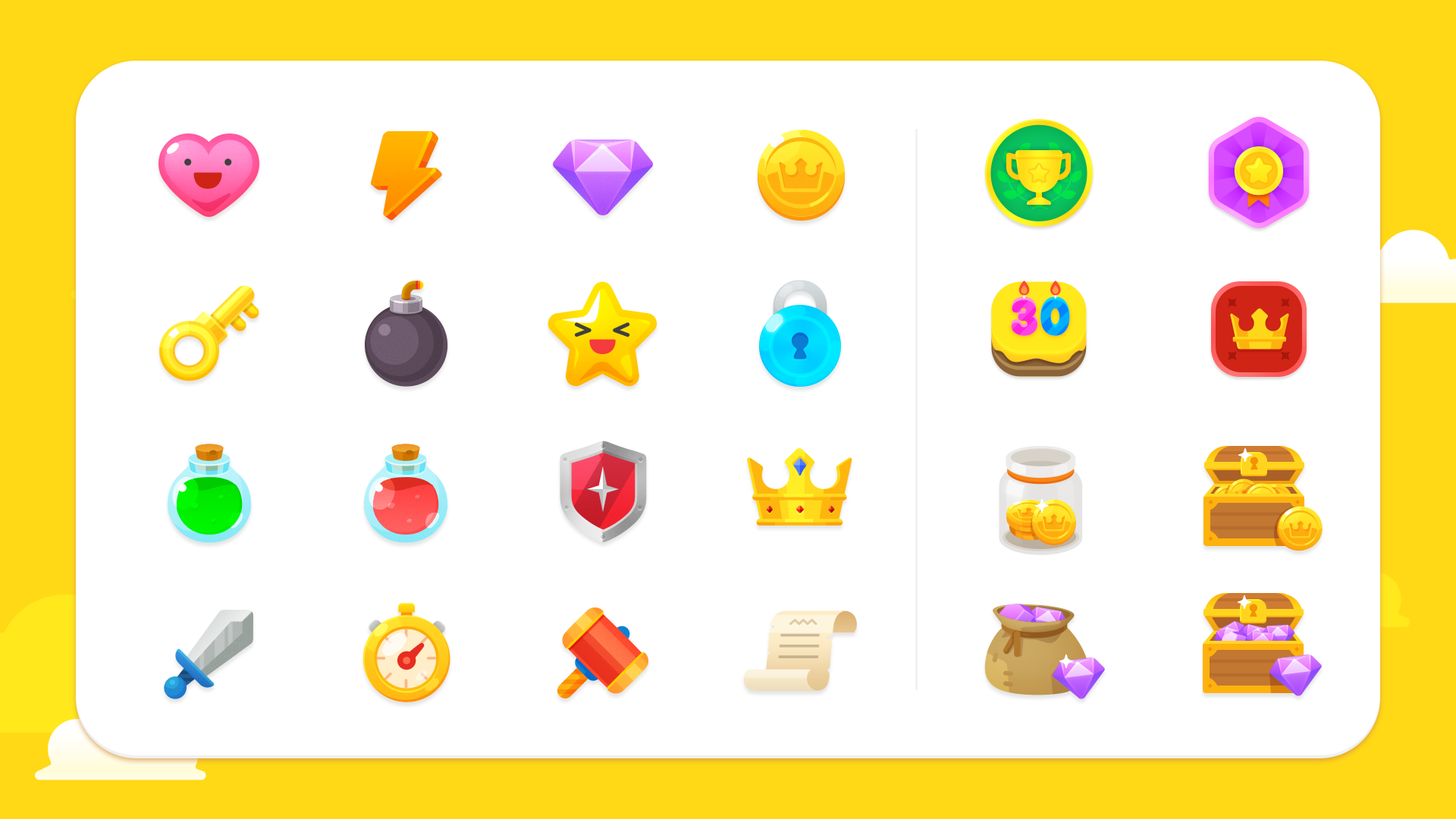
<style>
.page{position:relative;width:1456px;height:819px;background:#ffffff}
.page>*{position:absolute;margin:0}
.t1{font:43.9px "BPreplay-Bold";text-transform:uppercase;font-weight:bold;scale:1.19 1}
</style>
<div class="page">
<p class="t1" style="left:1011px;top:297px;width:59px;height:36px">30</p>
<p class="t1" style="left:1011px;top:300px;width:59px;height:36px">30</p>
</div>
